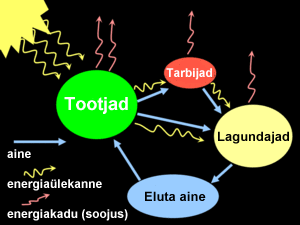
<style>
.page{position:relative;width:300px;height:225px;background:#000000}
.page>*{position:absolute;margin:0}
.t1{font:12px "MS Dialog";color:#fefefe}
.t2{font:18px "MS Dialog";color:#fefefe}
.t3{font:13px "MS Dialog";color:#010101}
</style>
<div class="page">
<p class="t1" style="left:166px;top:68px;width:46px;height:12px">Tarbijad</p>
<p class="t2" style="left:64px;top:97px;width:64px;height:17px">Tootjad</p>
<p class="t3" style="left:218px;top:131px;width:71px;height:13px">Lagundajad</p>
<p class="t1" style="left:7px;top:149px;width:24px;height:9px">aine</p>
<p class="t1" style="left:7px;top:179px;width:95px;height:12px">energiaülekanne</p>
<p class="t3" style="left:145px;top:191px;width:61px;height:10px">Eluta aine</p>
<p class="t1" style="left:7px;top:209px;width:121px;height:12px">energiakadu (soojus)</p>
</div>
